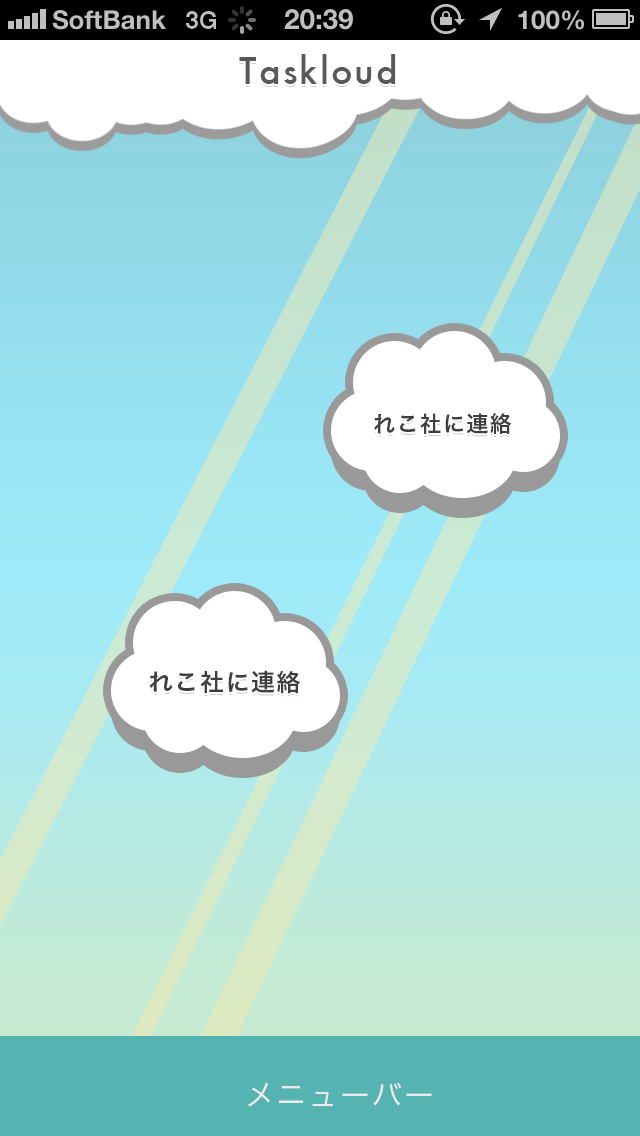
<style>
.page{position:relative;width:640px;height:1136px}
.page>*{position:absolute;margin:0}
.t1{font:36px "Futura-Medium";letter-spacing:0.06em;color:#595959}
.t2{font:22px "HiraKakuPro-W6";letter-spacing:0.06em;color:#454545}
.t3{font:24px "HiraKakuPro-W6";letter-spacing:0.06em;color:#454545}
.t4{font:30px "HiraKakuPro-W3";letter-spacing:0.06em;color:#ebebeb}
</style>
<div class="page">
<p class="t1" style="left:239px;top:54px;width:157px;height:30px">Taskloud</p>
<p class="t2" style="left:374px;top:412px;width:138px;height:23px">れこ社に連絡</p>
<p class="t3" style="left:149px;top:670px;width:151px;height:24px">れこ社に連絡</p>
<p class="t4" style="left:248px;top:1082px;width:184px;height:25px">メニューバー</p>
</div>
